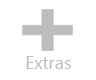
<style>
.page{position:relative;width:96px;height:80px;background:#ffffff}
.page>*{position:absolute;margin:0}
.t1{font:18px "SegoeUI";color:#bdbdbd}
</style>
<div class="page">
<p class="t1" style="left:26px;top:56px;width:45px;height:13px">Extras</p>
</div>
